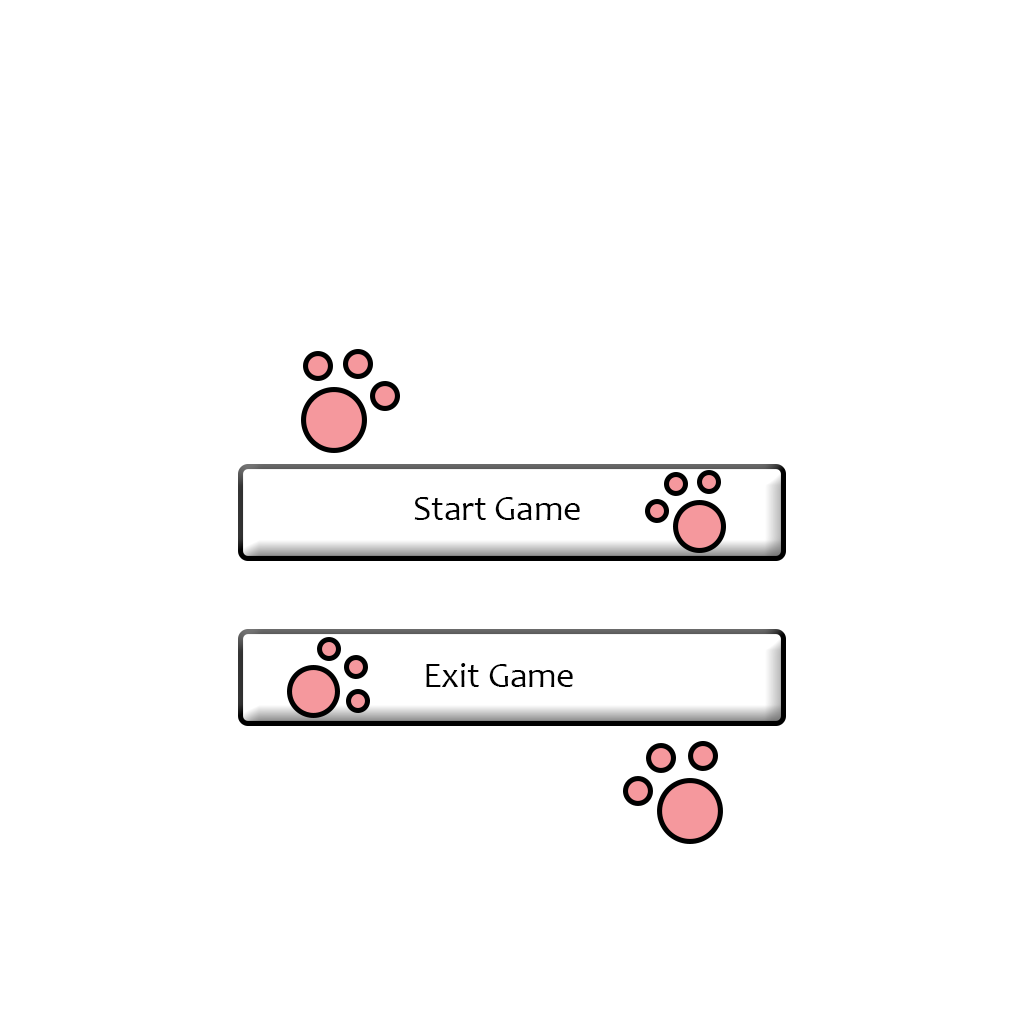
<style>
.page{position:relative;width:1024px;height:1024px;background:#ffffff}
.page>*{position:absolute;margin:0}
.t1{font:35.6px "Candara";color:#000000}
</style>
<div class="page">
<p class="t1" style="left:414px;top:497px;width:166px;height:23px">Start Game</p>
<p class="t1" style="left:426px;top:663px;width:147px;height:24px">Exit Game</p>
</div>
